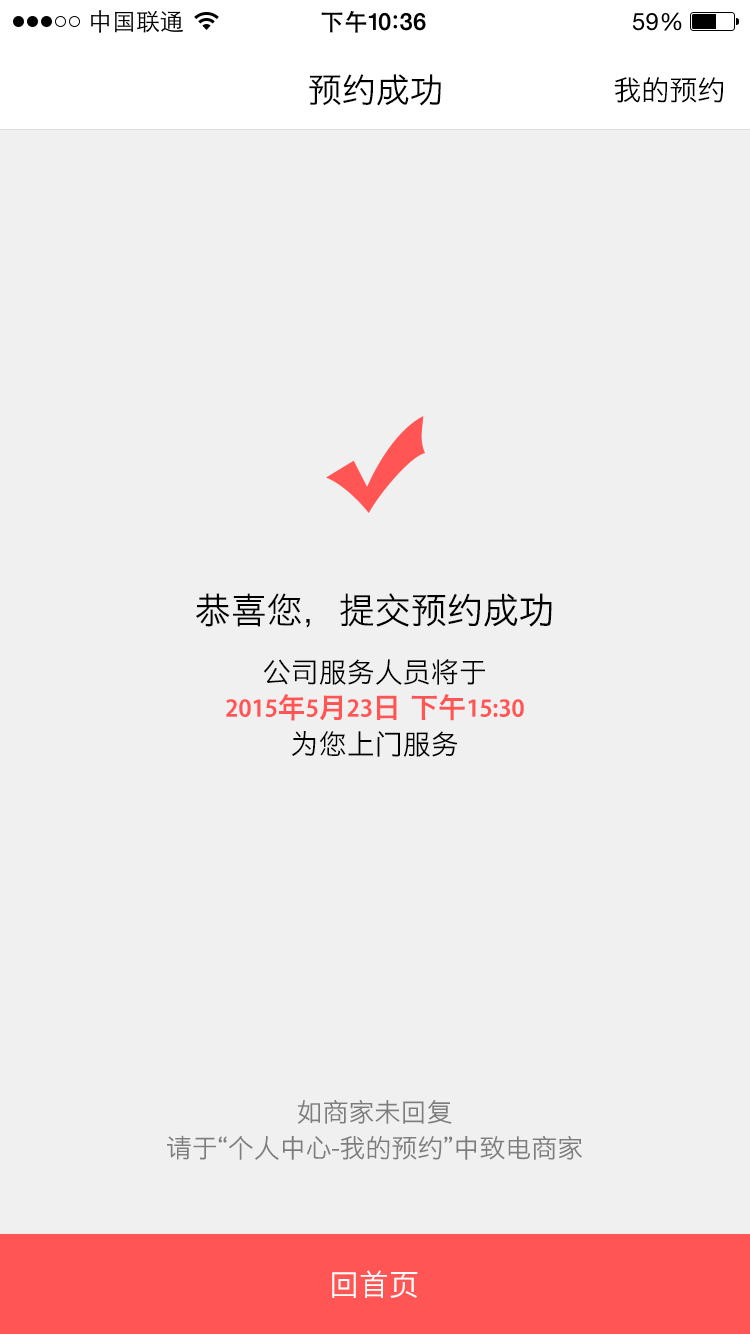
<style>
.page{position:relative;width:750px;height:1334px;background:#f0f0f0}
.page>*{position:absolute;margin:0}
.t1{font:34px "STHeitiSC-Light";color:#000000}
.t2{font:28px "STHeitiSC-Light";color:#000000}
.t3{font:28px/36px "STHeitiSC-Medium";color:#ff5555}
.t4{font:36px/30px "STHeitiSC-Light";color:#000000}
.t5{font:28px/36px "STHeitiSC-Light";color:#000000}
.t6{font:26px/36px "STHeitiSC-Light";color:#7e7d7d}
.t7{font:30px "STHeitiSC-Light";color:#ffffff}
</style>
<div class="page">
<p class="t1" style="left:309px;top:74px;width:132px;height:32px">预约成功</p>
<p class="t2" style="left:614px;top:77px;width:109px;height:26px">我的预约</p>
<p class="t3" style="left:196px;top:593px;width:356px;height:164px;text-align:center"><span class="t4">恭喜您，提交预约成功<br></span><span class="t5"><br>公司服务人员将于<br></span>2015年5月23日 下午15:30<br><span class="t5">为您上门服务</span></p>
<p class="t6" style="left:167px;top:1099px;width:415px;height:61px;text-align:center">如商家未回复<br>请于“个人中心-我的预约”中致电商家</p>
<p class="t7" style="left:332px;top:1270px;width:86px;height:28px">回首页</p>
</div>
